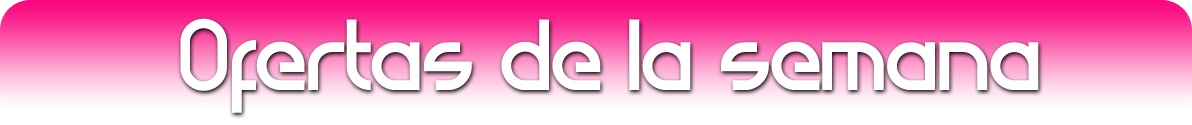
<style>
.page{position:relative;width:1192px;height:125px;background:#ffffff}
.page>*{position:absolute;margin:0}
.t1{font:80.5px "Atiba-Regular";color:#ffffff}
</style>
<div class="page">
<p class="t1" style="left:180px;top:18px;width:859px;height:95px">Ofertas de la semana</p>
</div>
